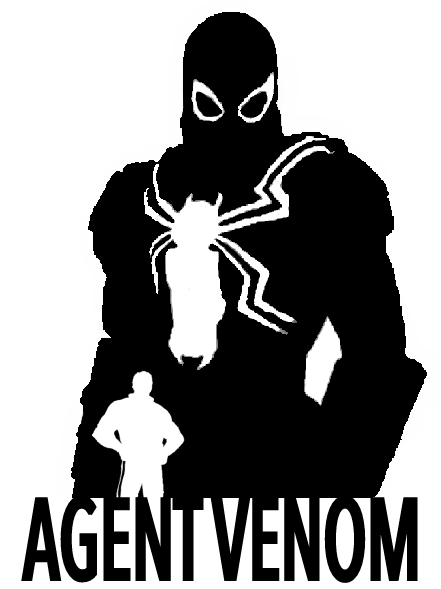
<style>
.page{position:relative;width:441px;height:589px;background:#ffffff}
.page>*{position:absolute;margin:0}
.t1{font:112.5px "AvenirNextCondensed-Medium";color:#000000;scale:0.67 1}
</style>
<div class="page">
<p class="t1" style="left:21px;top:495px;width:397px;height:88px">AGENT VENOM</p>
</div>
